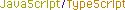
<style>
.page{position:relative;width:125px;height:10px;background:#ffffff}
.page>*{position:absolute;margin:0}
.t1{font:15px "PixelOperator";color:#a4a400}
.t2{font:15px "PixelOperator";color:#660099}
.t3{font:15px "PixelOperator";color:#c38500}
</style>
<div class="page">
<p class="t1" style="left:0px;top:0px;width:126px;height:10px">JavaScript<span class="t2">/</span><span class="t3">TypeScript</span></p>
</div>
